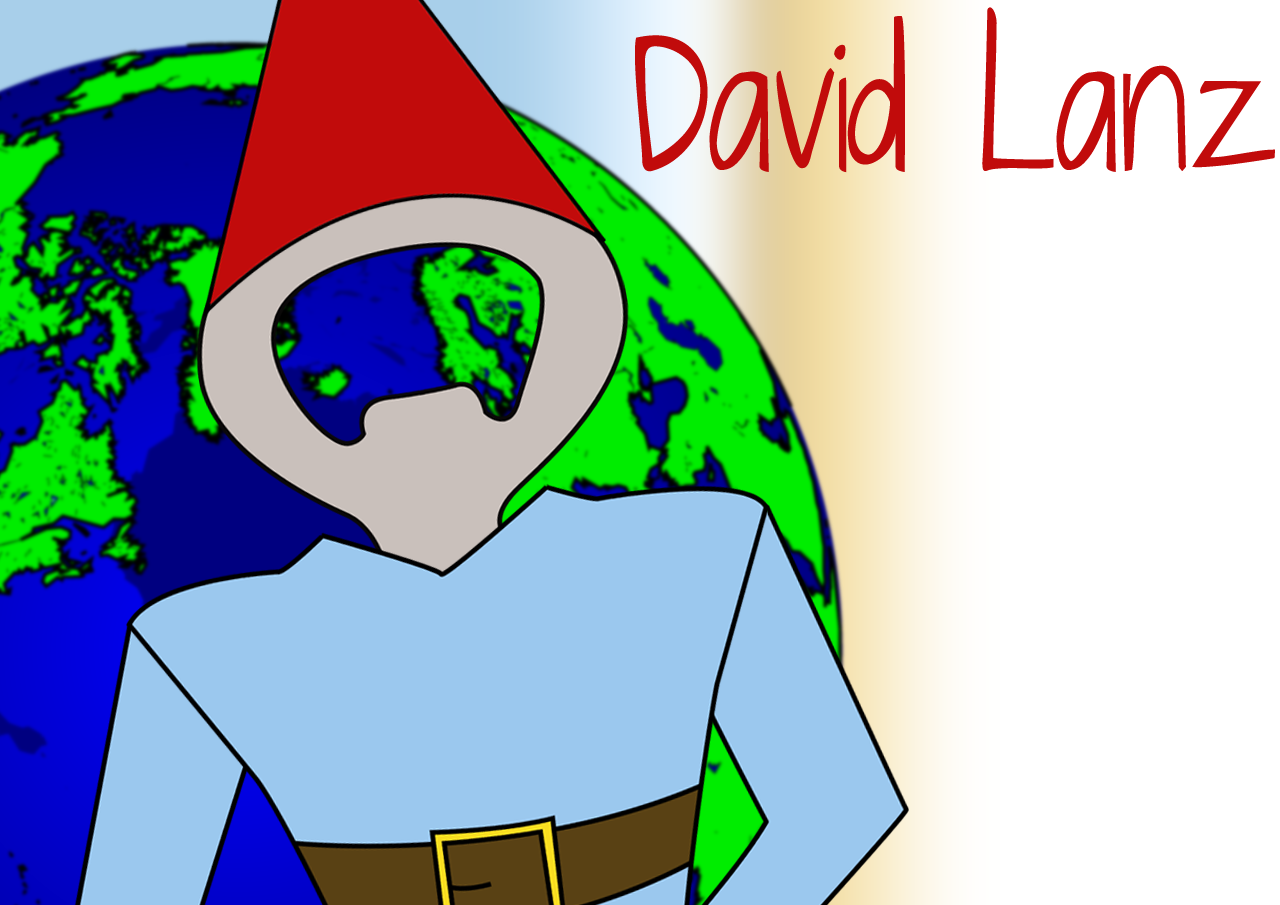
<style>
.page{position:relative;width:1280px;height:905px;background:#ffffff}
.page>*{position:absolute;margin:0}
.t1{font:178.5px "JustTheWayYouAre";letter-spacing:-0.025em;color:#c10b0b;scale:0.83 1}
</style>
<div class="page">
<p class="t1" style="left:635px;top:7px;width:640px;height:166px">David Lanz</p>
</div>
